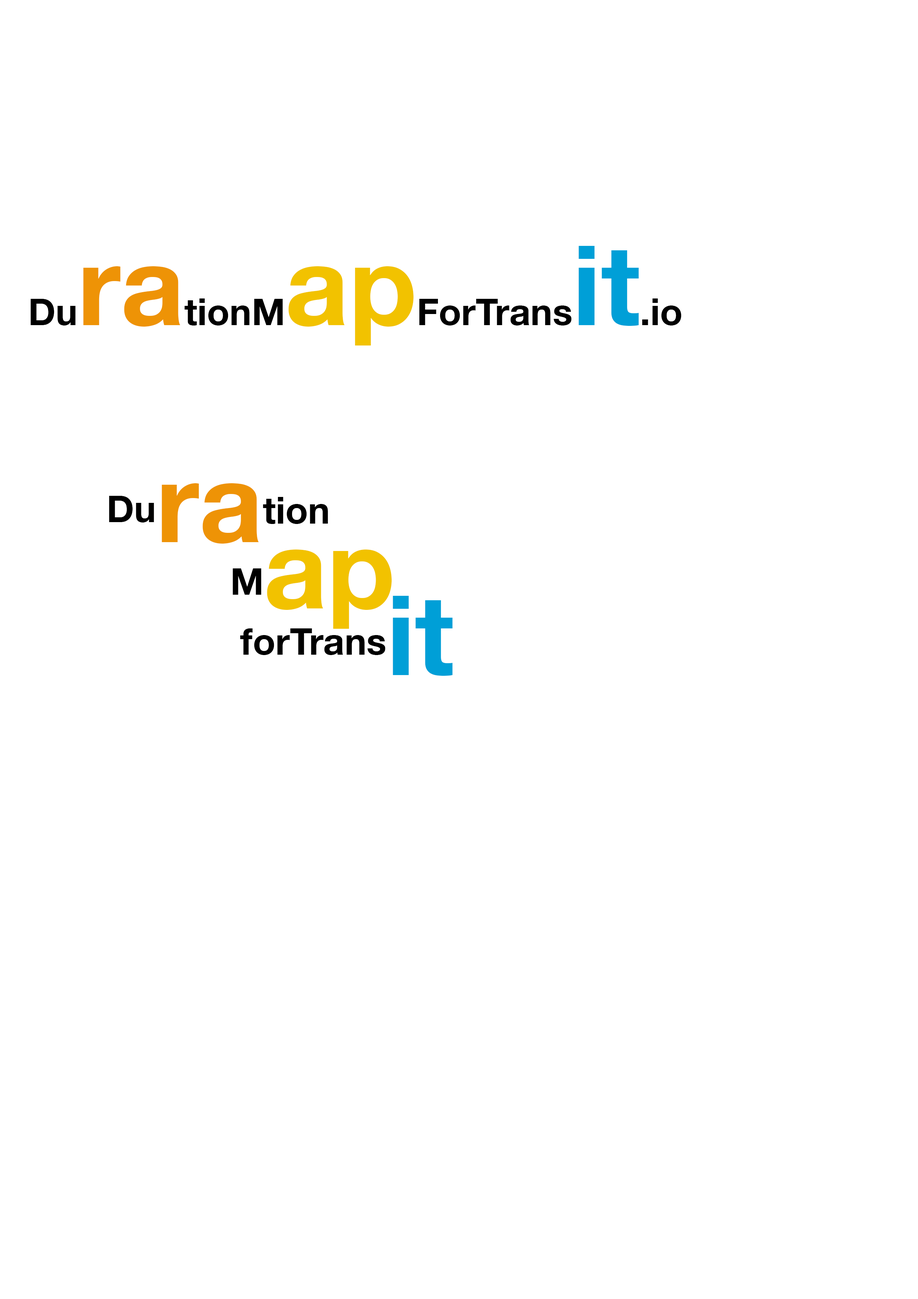
<style>
.page{position:relative;width:918px;height:1299px;background:#ffffff}
.page>*{position:absolute;margin:0}
.t1{font:37px "TUMNeueHelvetica-Bold";color:#000000}
.t2{font:111.1px "TUMNeueHelvetica-Bold";color:#ee9306}
.t3{font:111.1px "TUMNeueHelvetica-Bold";color:#f2c200}
.t4{font:111.1px "TUMNeueHelvetica-Bold";color:#009fd7}
.t5{font:37px "TUMNeueHelvetica-Bold";color:#020202}
.t6{font:37px/66.3px "TUMNeueHelvetica-Bold";color:#000000}
.t7{font:111.1px/66.3px "TUMNeueHelvetica-Bold";color:#ee9306}
.t8{font:111.1px/66.3px "TUMNeueHelvetica-Bold";color:#f2c200}
.t9{font:111.1px/66.3px "TUMNeueHelvetica-Bold";color:#009fd7}
</style>
<div class="page">
<p class="t1" style="left:30px;top:246px;width:652px;height:99px">Du<span class="t2">ra</span>tionM<span class="t3">ap</span>ForTrans<span class="t4">it</span><span class="t5">.io</span></p>
<p class="t6" style="left:109px;top:483px;width:344px;height:193px">Du<span class="t7">ra</span>tion<br>            M<span class="t8">ap<br>             </span>forTrans<span class="t9">it</span></p>
</div>
